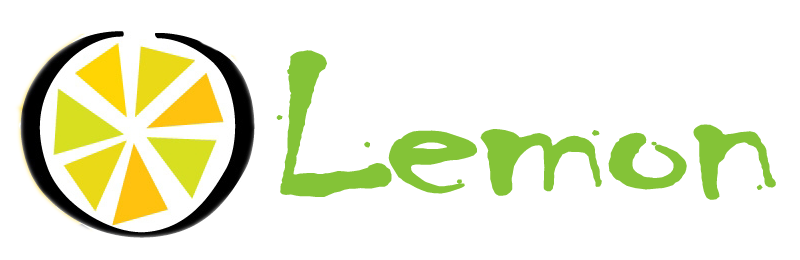
<style>
.page{position:relative;width:800px;height:260px;background:#ffffff}
.page>*{position:absolute;margin:0}
.t1{font:200px "Chiller-Regular";letter-spacing:-0.06em;color:#84c337;font-weight:bold;scale:1.5 1}
</style>
<div class="page">
<p class="t1" style="left:276px;top:50px;width:500px;height:150px">Lemon</p>
</div>
